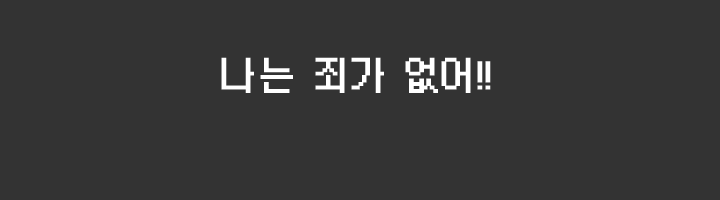
<style>
.page{position:relative;width:720px;height:200px;background:#333333}
.page>*{position:absolute;margin:0}
.t1{font:41.7px "morris9";color:#ffffff;font-weight:bold}
</style>
<div class="page">
<p class="t1" style="left:221px;top:57px;width:270px;height:36px">나는 죄가 없어!!</p>
</div>
